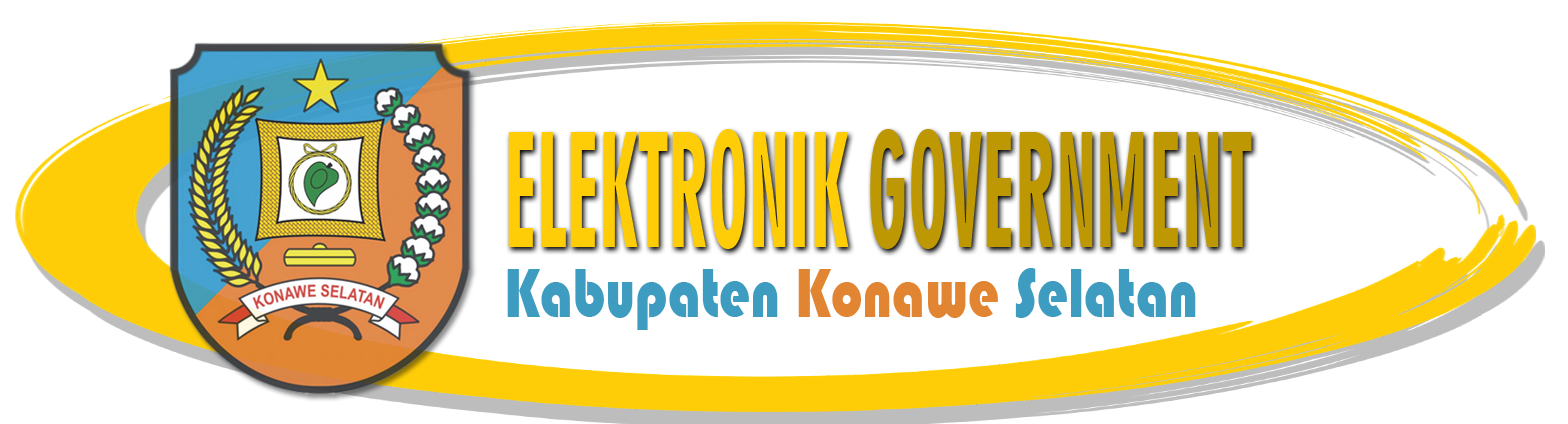
<style>
.page{position:relative;width:1568px;height:424px;background:#ffffff}
.page>*{position:absolute;margin:0}
.t1{font:150.3px "Geometric706BT-BlackCondensedB";color:#fecd08;scale:0.5 1}
.t2{font:150.3px "Geometric706BT-BlackCondensedB";color:#bd9803;scale:0.5 1}
.t3{font:72.3px "Bauhaus93";color:#3d9cbf;scale:0.77 1}
.t4{font:72.3px "Bauhaus93";color:#e18533;scale:0.77 1}
</style>
<div class="page">
<p class="t1" style="left:508px;top:129px;width:744px;height:120px">ELEKTRONIK <span class="t2">GOVERNMENT</span></p>
<p class="t3" style="left:507px;top:268px;width:689px;height:62px">Kabupaten <span class="t4">Konawe </span>Selatan</p>
</div>
